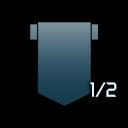
<style>
.page{position:relative;width:128px;height:128px;background:#000000}
.page>*{position:absolute;margin:0}
.t1{font:20px "SpaceEngineers";color:#dff7ff}
</style>
<div class="page">
<p class="t1" style="left:90px;top:82px;width:27px;height:15px">1/2</p>
</div>
